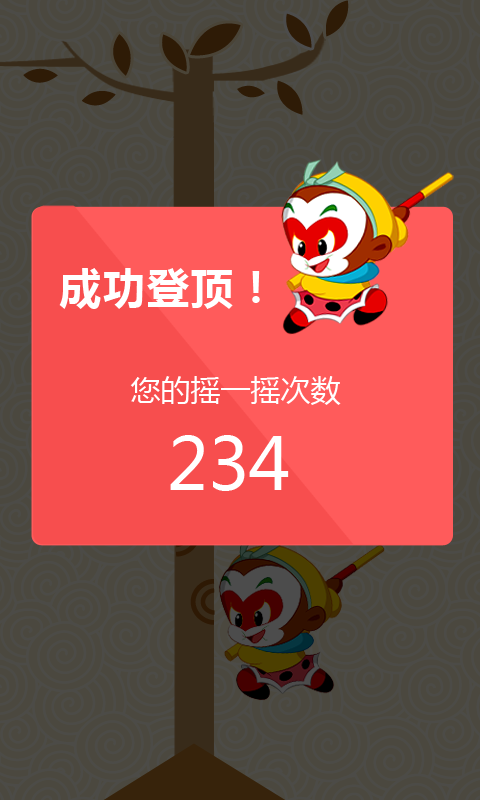
<style>
.page{position:relative;width:480px;height:800px;background:#4b483f}
.page>*{position:absolute;margin:0}
.t1{font:42px "MicrosoftYaHei-Bold";letter-spacing:0.05em;color:#ffffff}
.t2{font:30px "MicrosoftYaHei";color:#ffffff}
.t3{font:70.5px "MicrosoftYaHei";color:#ffffff}
</style>
<div class="page">
<p class="t1" style="left:59px;top:268px;width:201px;height:41px">成功登顶！</p>
<p class="t2" style="left:130px;top:376px;width:211px;height:29px">您的摇一摇次数</p>
<p class="t3" style="left:170px;top:435px;width:119px;height:56px">234</p>
</div>
